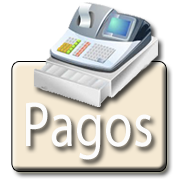
<style>
.page{position:relative;width:180px;height:180px;background:#ffffff}
.page>*{position:absolute;margin:0}
.t1{font:64px "MyriadPro-Regular";color:#fcfcfc;scale:0.81 1}
</style>
<div class="page">
<p class="t1" style="left:26px;top:102px;width:126px;height:58px">Pagos</p>
</div>
